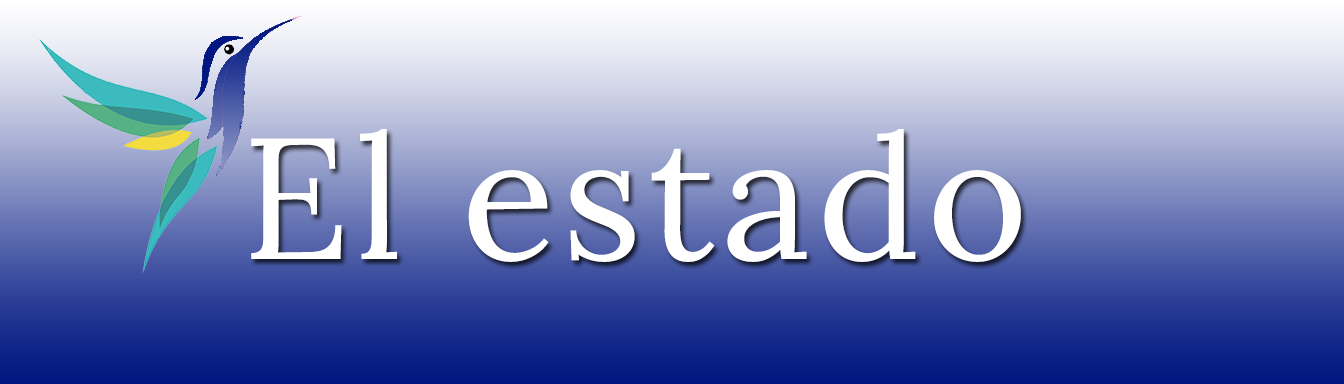
<style>
.page{position:relative;width:1344px;height:384px}
.page>*{position:absolute;margin:0}
.t1{font:172px "Lora-Regular";letter-spacing:0.04em;color:#ffffff}
</style>
<div class="page">
<p class="t1" style="left:251px;top:129px;width:770px;height:133px">El estado</p>
</div>
